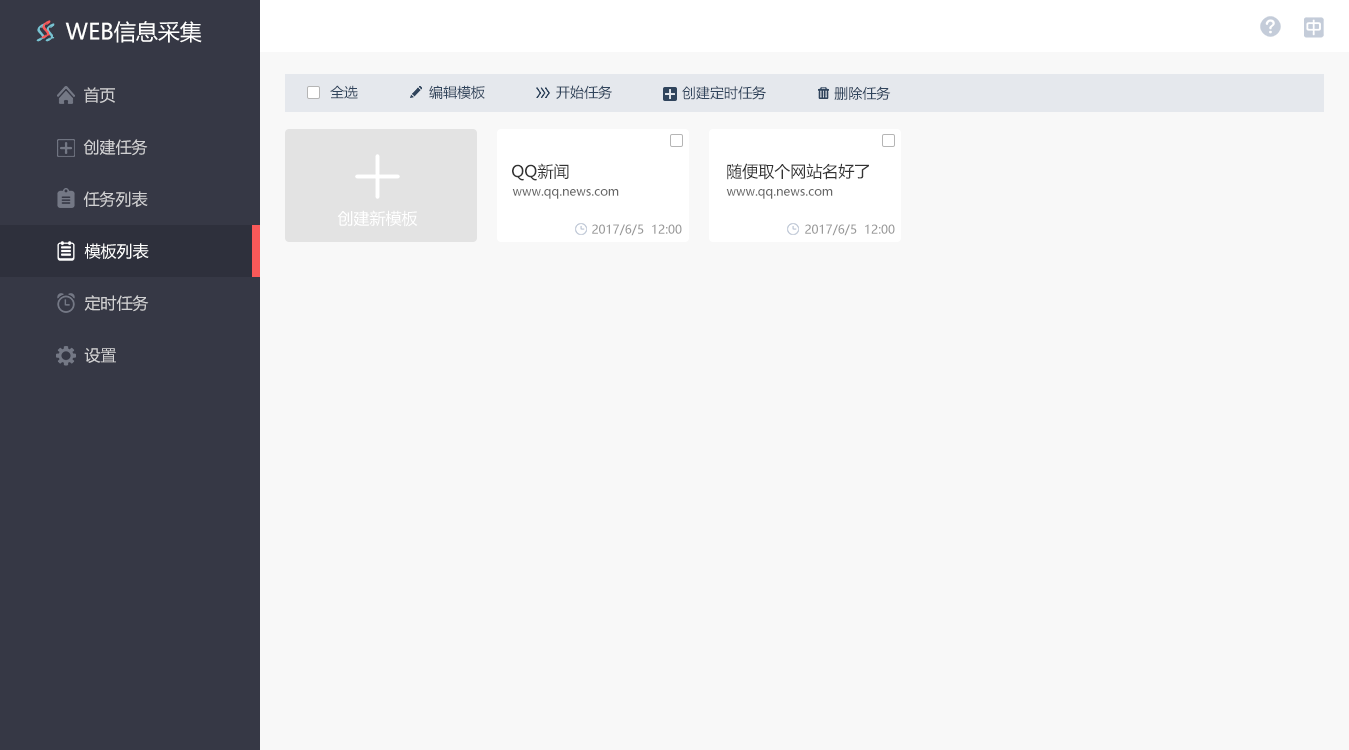
<style>
.page{position:relative;width:1349px;height:750px;background:#f8f8f8}
.page>*{position:absolute;margin:0}
.t1{font:24px "Mistral";color:#78c3d2}
.t2{font:24px "Mistral";color:#f95959}
.t3{font:22px "MicrosoftYaHei";color:#ffffff}
.t4{font:16px "MicrosoftYaHei";color:#d1d1d3}
.t5{font:14px "MicrosoftYaHei";color:#30445c}
.t6{font:16px "MicrosoftYaHei";color:#333333}
.t7{font:12px "MicrosoftYaHei";color:#666666}
.t8{font:16px "MicrosoftYaHei";color:#ffffff}
.t9{font:12px "MicrosoftYaHei";color:#999999}
</style>
<div class="page">
<p class="t1" style="left:36px;top:23px;width:10px;height:19px">S</p>
<p class="t2" style="left:41px;top:20px;width:10px;height:19px">S</p>
<p class="t1" style="left:45px;top:23px;width:10px;height:19px">S</p>
<p class="t3" style="left:65px;top:21px;width:137px;height:22px">WEB信息采集</p>
<p class="t4" style="left:84px;top:87px;width:31px;height:16px">首页</p>
<p class="t5" style="left:330px;top:85px;width:28px;height:14px">全选</p>
<p class="t5" style="left:429px;top:85px;width:56px;height:14px">编辑模板</p>
<p class="t5" style="left:556px;top:85px;width:56px;height:14px">开始任务</p>
<p class="t5" style="left:682px;top:86px;width:84px;height:14px">创建定时任务</p>
<p class="t5" style="left:834px;top:86px;width:57px;height:14px">删除任务</p>
<p class="t4" style="left:83px;top:139px;width:65px;height:17px">创建任务</p>
<p class="t6" style="left:512px;top:163px;width:57px;height:18px">QQ新闻</p>
<p class="t6" style="left:727px;top:163px;width:142px;height:17px">随便取个网站名好了</p>
<p class="t4" style="left:83px;top:191px;width:65px;height:17px">任务列表</p>
<p class="t7" style="left:512px;top:189px;width:107px;height:10px">www.qq.news.com</p>
<p class="t7" style="left:726px;top:189px;width:107px;height:10px">www.qq.news.com</p>
<p class="t8" style="left:337px;top:210px;width:81px;height:17px">创建新模板</p>
<p class="t9" style="left:592px;top:224px;width:90px;height:12px">2017/6/5  12:00</p>
<p class="t9" style="left:805px;top:224px;width:90px;height:12px">2017/6/5  12:00</p>
<p class="t8" style="left:84px;top:243px;width:65px;height:16px">模板列表</p>
<p class="t4" style="left:84px;top:295px;width:65px;height:17px">定时任务</p>
<p class="t4" style="left:84px;top:348px;width:32px;height:15px">设置</p>
</div>
